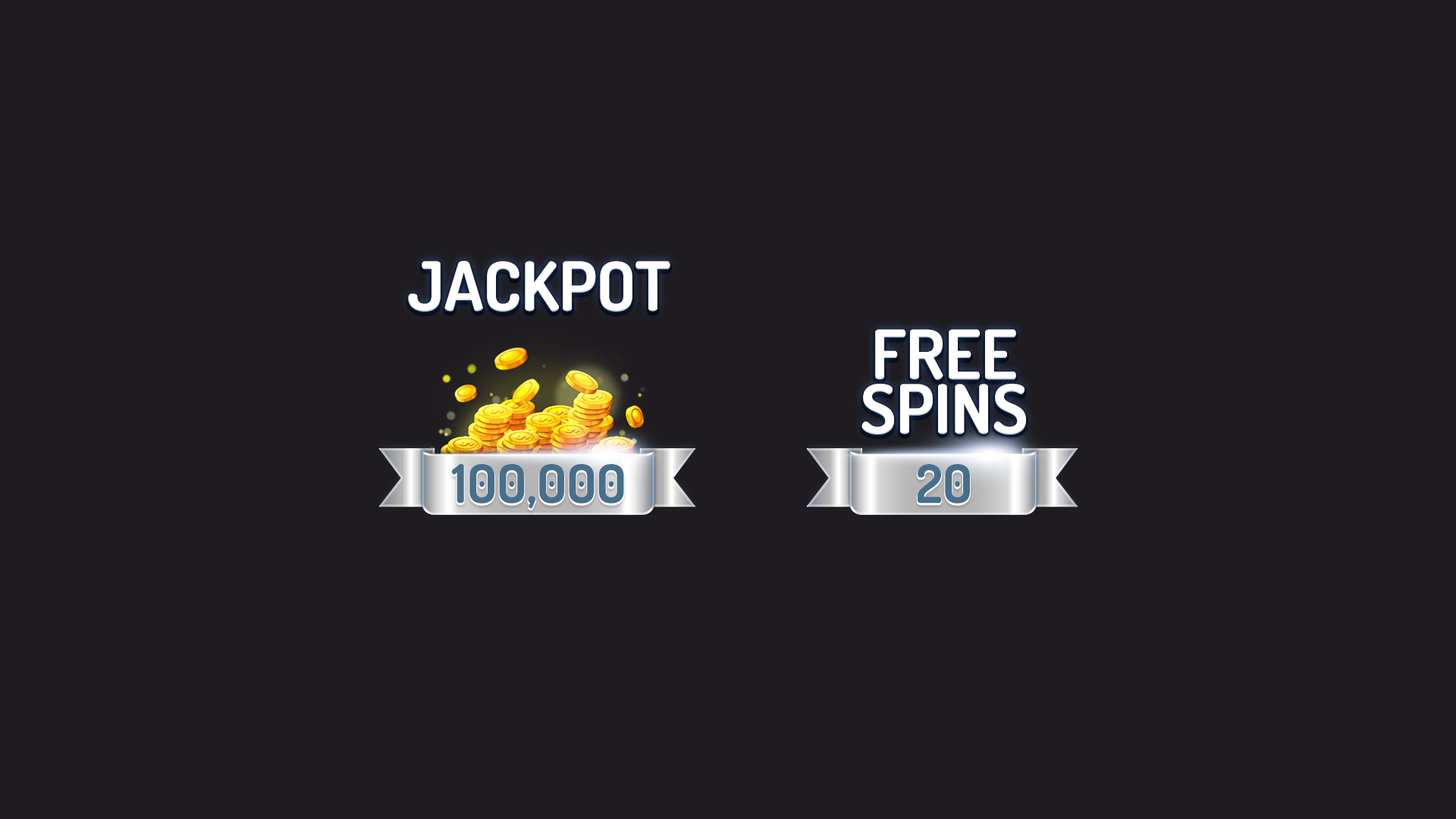
<style>
.page{position:relative;width:1456px;height:819px;background:#1e1c20}
.page>*{position:absolute;margin:0}
.t1{font:68.2px "Dosis-Bold";color:#ffffff;text-transform:uppercase}
.t2{font:68.2px/54.6px "Dosis-Bold";color:#ffffff;text-transform:uppercase}
.t3{font:53.1px "Dosis-Bold";color:#476f8b;text-transform:uppercase}
</style>
<div class="page">
<p class="t1" style="left:408px;top:261px;width:262px;height:51px">Jackpot</p>
<p class="t2" style="left:861px;top:329px;width:165px;height:106px;text-align:center">free<br>Spins</p>
<p class="t3" style="left:452px;top:463px;width:172px;height:46px">100,000</p>
<p class="t3" style="left:918px;top:464px;width:52px;height:40px">20</p>
</div>
